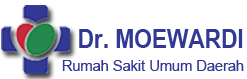
<style>
.page{position:relative;width:247px;height:79px;background:#ffffff}
.page>*{position:absolute;margin:0}
.t1{font:26.2px "Arial-BoldMT";color:#323994;scale:0.86 1}
.t2{font:14.7px "ArialMT";color:#323994}
</style>
<div class="page">
<p class="t1" style="left:79px;top:29px;width:164px;height:19px">Dr. MOEWARDI</p>
<p class="t2" style="left:62px;top:60px;width:182px;height:11px">Rumah Sakit Umum Daerah</p>
</div>
